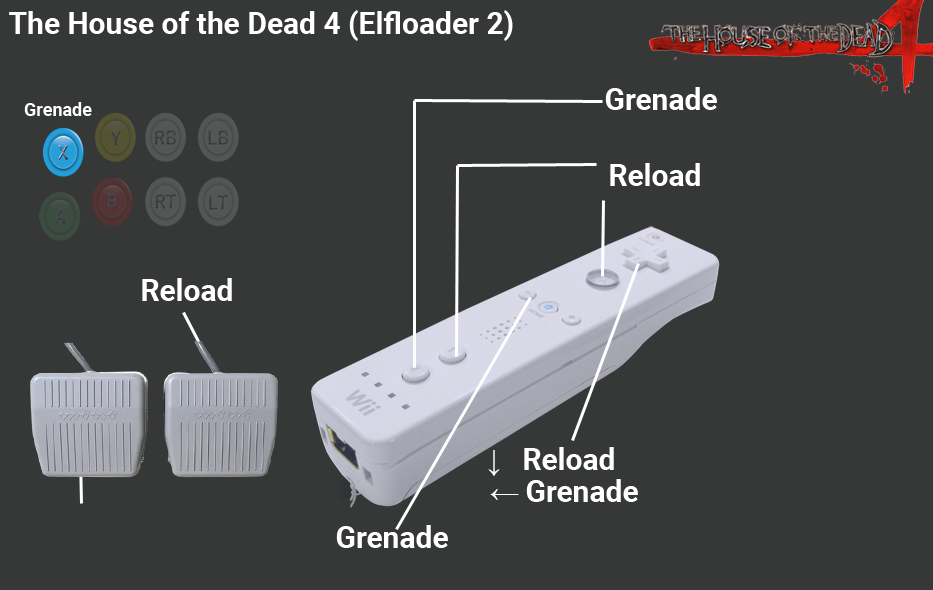
<style>
.page{position:relative;width:933px;height:590px;background:#363838}
.page>*{position:absolute;margin:0}
.t1{font:30px "Roboto-Bold";color:#ffffff}
.t2{font:18px "Roboto-Bold";color:#ffffff}
.t3{font:30px "MicrosoftSansSerif";color:#ffffff}
</style>
<div class="page">
<p class="t1" style="left:9px;top:10px;width:504px;height:31px">The House of the Dead 4 (Elfloader 2)</p>
<p class="t1" style="left:605px;top:87px;width:112px;height:23px">Grenade</p>
<p class="t2" style="left:24px;top:102px;width:68px;height:14px">Grenade</p>
<p class="t1" style="left:610px;top:163px;width:90px;height:23px">Reload</p>
<p class="t1" style="left:142px;top:278px;width:90px;height:23px">Reload</p>
<p class="t1" style="left:488px;top:447px;width:126px;height:29px"><span class="t3">↓ </span>Reload</p>
<p class="t1" style="left:490px;top:479px;width:148px;height:23px"><span class="t3">← </span>Grenade</p>
<p class="t1" style="left:336px;top:525px;width:112px;height:23px">Grenade</p>
</div>
